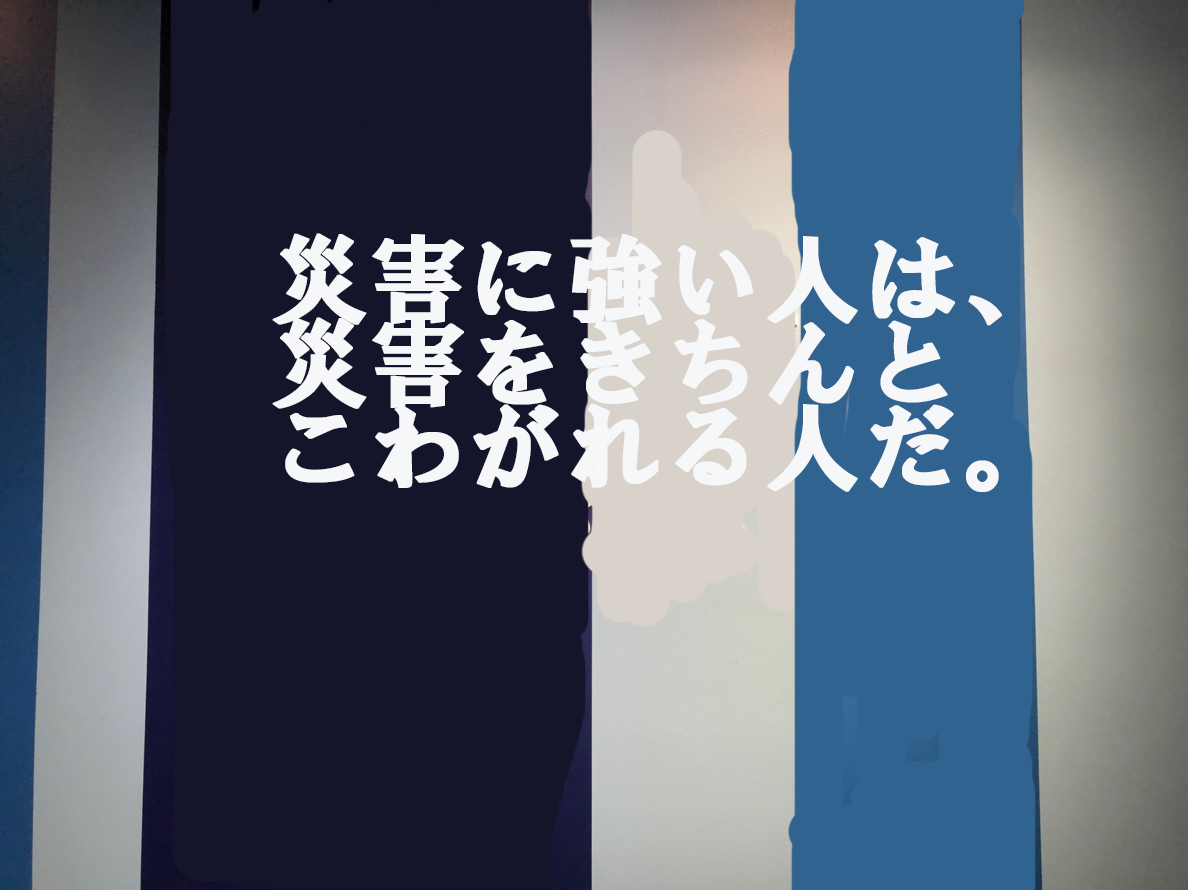
<style>
.page{position:relative;width:1188px;height:890px;background:#14152a}
.page>*{position:absolute;margin:0}
.t1{font:96px "HGSSoeiPresenceEB";color:#f6f7f8;font-weight:bold}
</style>
<div class="page">
<p class="t1" style="left:272px;top:233px;width:730px;height:259px">災害に強い人は、<br>災害をきちんと<br>こわがれる人だ。</p>
</div>
